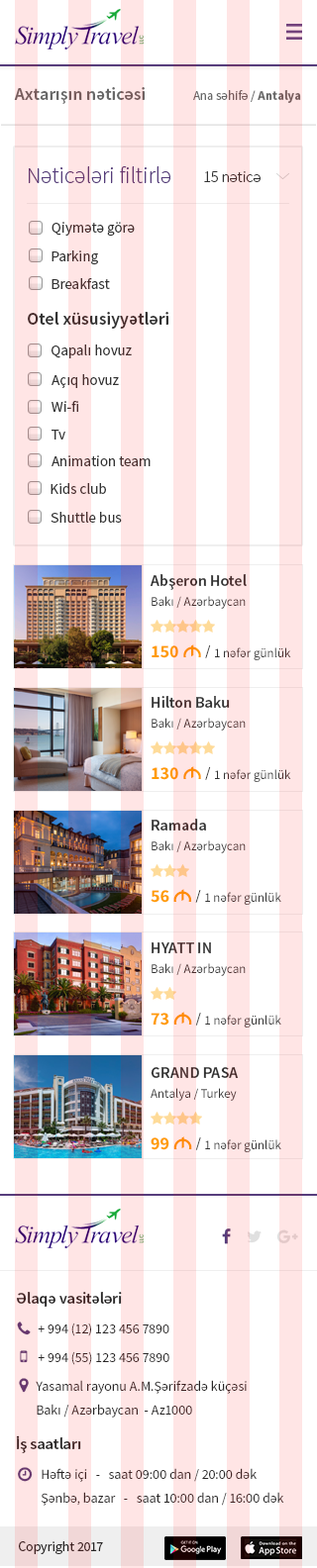
<style>
.page{position:relative;width:317px;height:1568px;background:#ffffff}
.page>*{position:absolute;margin:0}
.t1{font:17.8px "SourceSansPro-Semibold";color:#686868}
.t2{font:12.9px "SourceSansPro-Regular";color:#686868}
.t3{font:12.9px "SourceSansPro-Bold";color:#686868}
.t4{font:22.8px "SourceSansPro-Light";color:#563d7c}
.t5{font:15.8px "SourceSansPro-Light";color:#333333}
.t6{font:14.8px "SourceSansPro-Regular";color:#333333}
.t7{font:17.8px "SourceSansPro-Semibold";color:#333333}
.t8{font:15.8px "SourceSansPro-Semibold";color:#333333}
.t9{font:12.9px "SourceSansPro-Regular";color:#333333}
.t10{font:17.8px "SourceSansPro-Bold";color:#ff9c00}
.t11{font:17.8px "JISAZNBold";color:#ff9c00}
.t12{font:17.8px "MinionPro-Regular";color:#333333}
.t13{font:15.8px "SourceSansPro-Semibold";color:#282626}
.t14{font:13.9px "SourceSansPro-Regular";color:#282626}
.t15{font:13.9px/23.8px "SourceSansPro-Regular";color:#282626}
</style>
<div class="page">
<p class="t1" style="left:14px;top:87px;width:131px;height:17px">Axtarışın nəticəsi</p>
<p class="t2" style="left:193px;top:90px;width:108px;height:13px">Ana səhifə / <span class="t3">Antalya</span></p>
<p class="t4" style="left:29px;top:166px;width:141px;height:17px">Nəticələri filtirlə</p>
<p class="t5" style="left:204px;top:171px;width:56px;height:11px">15 nəticə</p>
<p class="t6" style="left:51px;top:222px;width:84px;height:15px">Qiymətə görə</p>
<p class="t6" style="left:51px;top:250px;width:47px;height:15px">Parking</p>
<p class="t6" style="left:51px;top:278px;width:59px;height:11px">Breakfast</p>
<p class="t7" style="left:28px;top:312px;width:140px;height:17px">Otel xüsusiyyətləri</p>
<p class="t6" style="left:51px;top:344px;width:81px;height:14px">Qapalı hovuz</p>
<p class="t6" style="left:51px;top:374px;width:68px;height:14px">Açıq hovuz</p>
<p class="t6" style="left:51px;top:401px;width:27px;height:11px">Wi-fi</p>
<p class="t6" style="left:51px;top:430px;width:14px;height:10px">Tv</p>
<p class="t6" style="left:51px;top:455px;width:99px;height:11px">Animation team</p>
<p class="t6" style="left:50px;top:483px;width:56px;height:11px">Kids club</p>
<p class="t6" style="left:50px;top:512px;width:72px;height:11px">Shuttle bus</p>
<p class="t8" style="left:149px;top:574px;width:97px;height:16px">Abşeron Hotel</p>
<p class="t9" style="left:151px;top:596px;width:94px;height:13px">Bakı / Azərbaycan</p>
<p class="t9" style="left:151px;top:644px;width:140px;height:16px"><span class="t10">150 </span><span class="t11">M    </span><span class="t12">/ </span>1 nəfər günlük</p>
<p class="t8" style="left:151px;top:696px;width:79px;height:12px">Hilton Baku</p>
<p class="t9" style="left:151px;top:718px;width:94px;height:13px">Bakı / Azərbaycan</p>
<p class="t9" style="left:151px;top:766px;width:140px;height:16px"><span class="t10">130 </span><span class="t11">M    </span><span class="t12">/ </span>1 nəfər günlük</p>
<p class="t8" style="left:151px;top:819px;width:55px;height:12px">Ramada</p>
<p class="t9" style="left:151px;top:840px;width:94px;height:13px">Bakı / Azərbaycan</p>
<p class="t9" style="left:150px;top:889px;width:131px;height:16px"><span class="t10">56 </span><span class="t11">M    </span><span class="t12">/ </span>1 nəfər günlük</p>
<p class="t8" style="left:151px;top:942px;width:60px;height:11px">HYATT IN</p>
<p class="t9" style="left:151px;top:963px;width:94px;height:13px">Bakı / Azərbaycan</p>
<p class="t9" style="left:150px;top:1012px;width:131px;height:16px"><span class="t10">73 </span><span class="t11">M    </span><span class="t12">/ </span>1 nəfər günlük</p>
<p class="t8" style="left:150px;top:1067px;width:89px;height:11px">GRAND PASA</p>
<p class="t9" style="left:150px;top:1088px;width:87px;height:13px">Antalya / Turkey</p>
<p class="t9" style="left:150px;top:1136px;width:131px;height:16px"><span class="t10">99 </span><span class="t11">M    </span><span class="t12">/ </span>1 nəfər günlük</p>
<p class="t13" style="left:17px;top:1292px;width:105px;height:15px">Əlaqə vasitələri</p>
<p class="t14" style="left:38px;top:1323px;width:131px;height:13px">+ 994 (12) 123 456 7890</p>
<p class="t14" style="left:38px;top:1351px;width:131px;height:14px">+ 994 (55) 123 456 7890</p>
<p class="t15" style="left:36px;top:1380px;width:210px;height:38px;text-align:justify">Yasamal rayonu A.M.Şərifzadə küçəsi<br>Bakı / Azərbaycan  - Az1000</p>
<p class="t13" style="left:16px;top:1435px;width:65px;height:18px">İş saatları</p>
<p class="t15" style="left:41px;top:1468px;width:243px;height:38px;text-align:justify">Həftə içi   -   saat 09:00 dan / 20:00 dək<br>Şənbə, bazar   -   saat 10:00 dan / 16:00 dək</p>
<p class="t14" style="left:19px;top:1541px;width:84px;height:13px">Copyright 2017</p>
</div>
